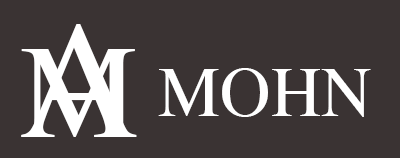
<style>
.page{position:relative;width:400px;height:158px;background:#3a3333}
.page>*{position:absolute;margin:0}
.t1{font:166.3px "Times-Roman";color:#ffffff}
.t2{font:133.1px "Times-Roman";color:#ffffff}
.t3{font:70px "Times-Roman";color:#ffffff}
</style>
<div class="page">
<p class="t1" style="left:21px;top:24px;width:116px;height:113px">A</p>
<p class="t2" style="left:21px;top:49px;width:114px;height:88px">M</p>
<p class="t3" style="left:158px;top:68px;width:213px;height:49px">MOHN</p>
</div>
